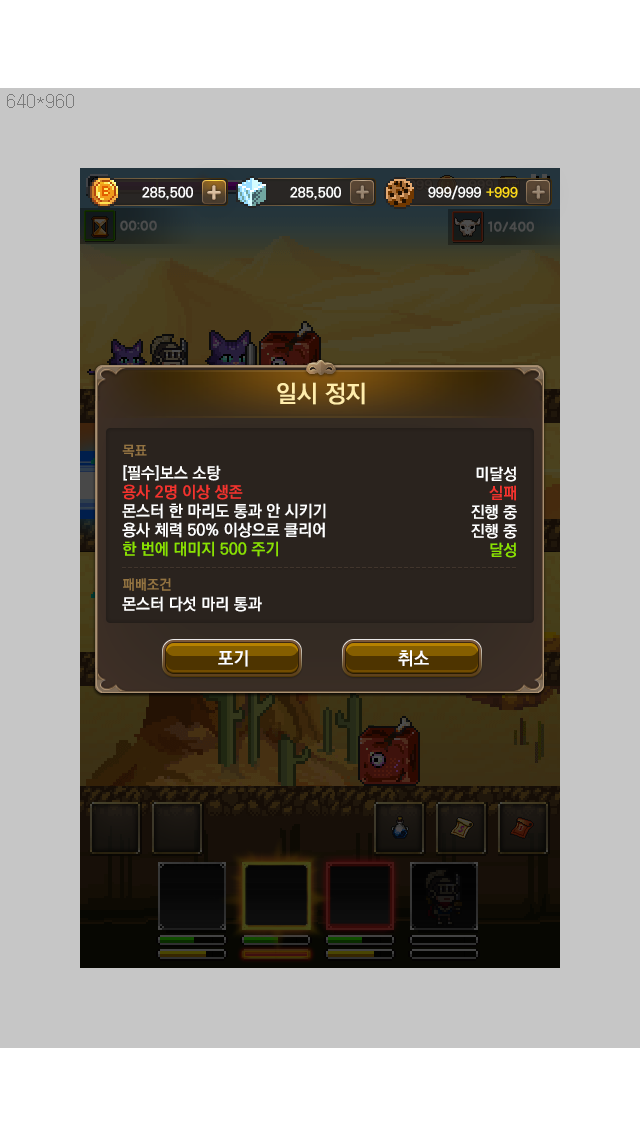
<style>
.page{position:relative;width:640px;height:1136px;background:#c6c6c6}
.page>*{position:absolute;margin:0}
.t1{font:24px "KoPubDotumBold";color:#ffedab}
.t2{font:14px "KoPubDotumBold";color:#947441}
.t3{font:16px "KoPubDotumBold";color:#ffffff}
.t4{font:16px "KoPubDotumBold";color:#f3332e}
.t5{font:16px "KoPubDotumBold";color:#8ae001}
.t6{font:16px "KoPubDotumBold";color:#f4332e}
.t7{font:18px "KoPubDotumBold"}
.t8{font:18px "KoPubDotumBold";color:#ffffff}
</style>
<div class="page">
<p class="t1" style="left:276px;top:382px;width:88px;height:23px">일시 정지</p>
<p class="t1" style="left:277px;top:382px;width:88px;height:23px">일시 정지</p>
<p class="t2" style="left:122px;top:444px;width:25px;height:13px">목표</p>
<p class="t3" style="left:122px;top:465px;width:204px;height:92px">[필수]보스 소탕<br><span class="t4">용사 2명 이상 생존<br></span>몬스터 한 마리도 통과 안 시키기<br>용사 체력 50% 이상으로 클리어<br><span class="t5">한 번에 대미지 500 주기</span></p>
<p class="t3" style="left:471px;top:466px;width:46px;height:92px;text-align:right">미달성<br><span class="t6">실패<br></span>진행 중<br>진행 중<br><span class="t5">달성</span></p>
<p class="t2" style="left:123px;top:578px;width:48px;height:13px">패배조건</p>
<p class="t3" style="left:122px;top:596px;width:140px;height:16px">몬스터 다섯 마리 통과</p>
<p class="t7" style="left:217px;top:650px;width:30px;height:17px">포기</p>
<p class="t8" style="left:218px;top:650px;width:30px;height:17px">포기</p>
<p class="t7" style="left:397px;top:650px;width:31px;height:17px">취소</p>
<p class="t8" style="left:398px;top:650px;width:31px;height:17px">취소</p>
</div>
